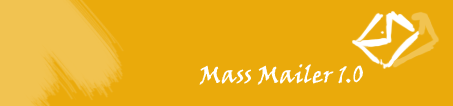
<style>
.page{position:relative;width:453px;height:106px;background:#eaaa0b}
.page>*{position:absolute;margin:0}
.t1{font:24px "VinerHandITC";color:#ffffff}
</style>
<div class="page">
<p class="t1" style="left:199px;top:64px;width:164px;height:21px">Mass Mailer 1.0</p>
</div>
